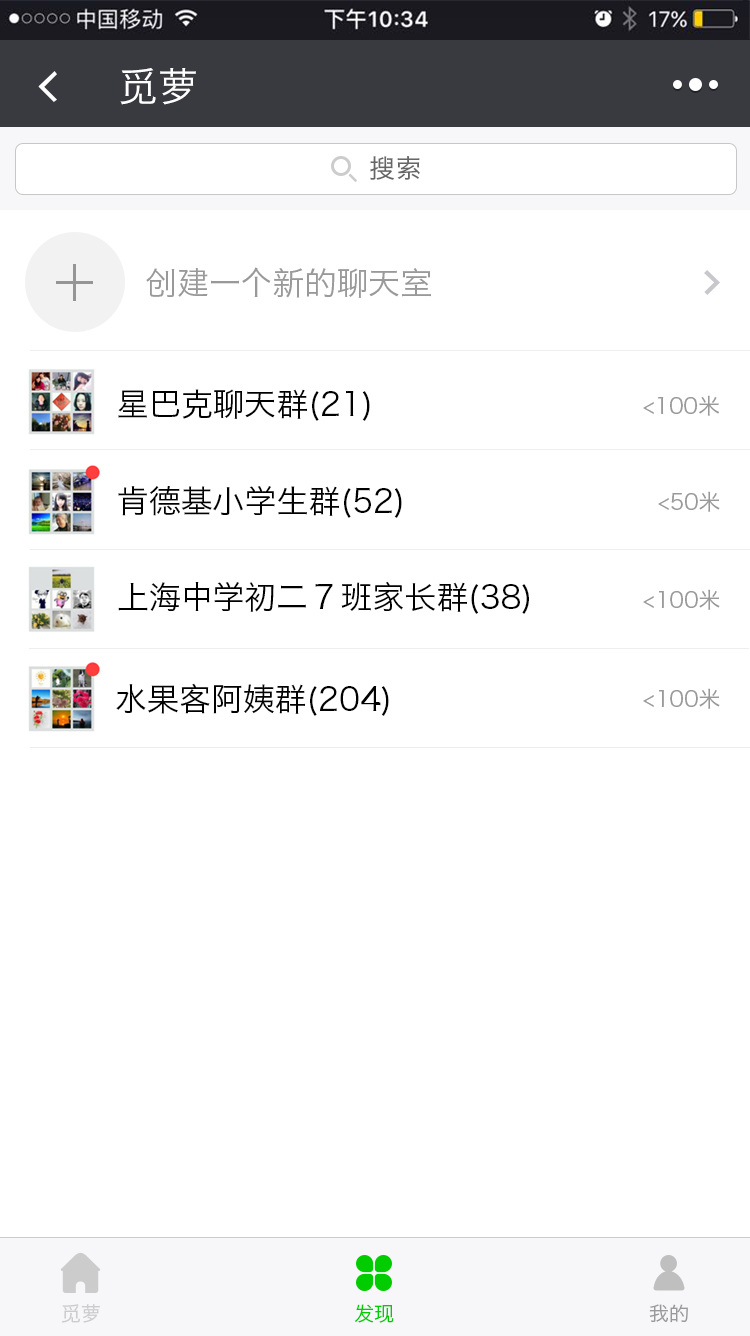
<style>
.page{position:relative;width:750px;height:1336px;background:#ffffff}
.page>*{position:absolute;margin:0}
.t1{font:40px "HiraginoSansGB-W3";color:#ffffff}
.t2{font:25.9px "HiraginoSansGB-W3";color:#666666}
.t3{font:32px "HiraginoSansGB-W3";color:#999999}
.t4{font:32px "HiraginoSansGB-W3";color:#000000}
.t5{font:22px "HiraginoSansGB-W3";color:#999999}
.t6{font:20px "HiraginoSansGB-W3";color:#cccccc}
.t7{font:20px "HiraginoSansGB-W3";color:#00cc00}
.t8{font:20px "HiraginoSansGB-W3";color:#999999}
</style>
<div class="page">
<p class="t1" style="left:120px;top:68px;width:76px;height:37px">觅萝</p>
<p class="t2" style="left:370px;top:156px;width:50px;height:24px">搜索</p>
<p class="t3" style="left:146px;top:267px;width:285px;height:31px">创建一个新的聊天室</p>
<p class="t4" style="left:118px;top:389px;width:252px;height:32px">星巴克聊天群(21)</p>
<p class="t5" style="left:643px;top:395px;width:77px;height:21px">&lt;100米</p>
<p class="t4" style="left:118px;top:486px;width:284px;height:32px">肯德基小学生群(52)</p>
<p class="t5" style="left:658px;top:491px;width:62px;height:21px">&lt;50米</p>
<p class="t4" style="left:118px;top:581px;width:411px;height:33px">上海中学初二７班家长群(38)</p>
<p class="t5" style="left:643px;top:589px;width:77px;height:21px">&lt;100米</p>
<p class="t4" style="left:116px;top:683px;width:273px;height:33px">水果客阿姨群(204)</p>
<p class="t5" style="left:643px;top:688px;width:77px;height:21px">&lt;100米</p>
<p class="t6" style="left:61px;top:1304px;width:39px;height:19px">觅萝</p>
<p class="t7" style="left:354px;top:1304px;width:40px;height:19px">发现</p>
<p class="t8" style="left:649px;top:1304px;width:39px;height:19px">我的</p>
</div>
